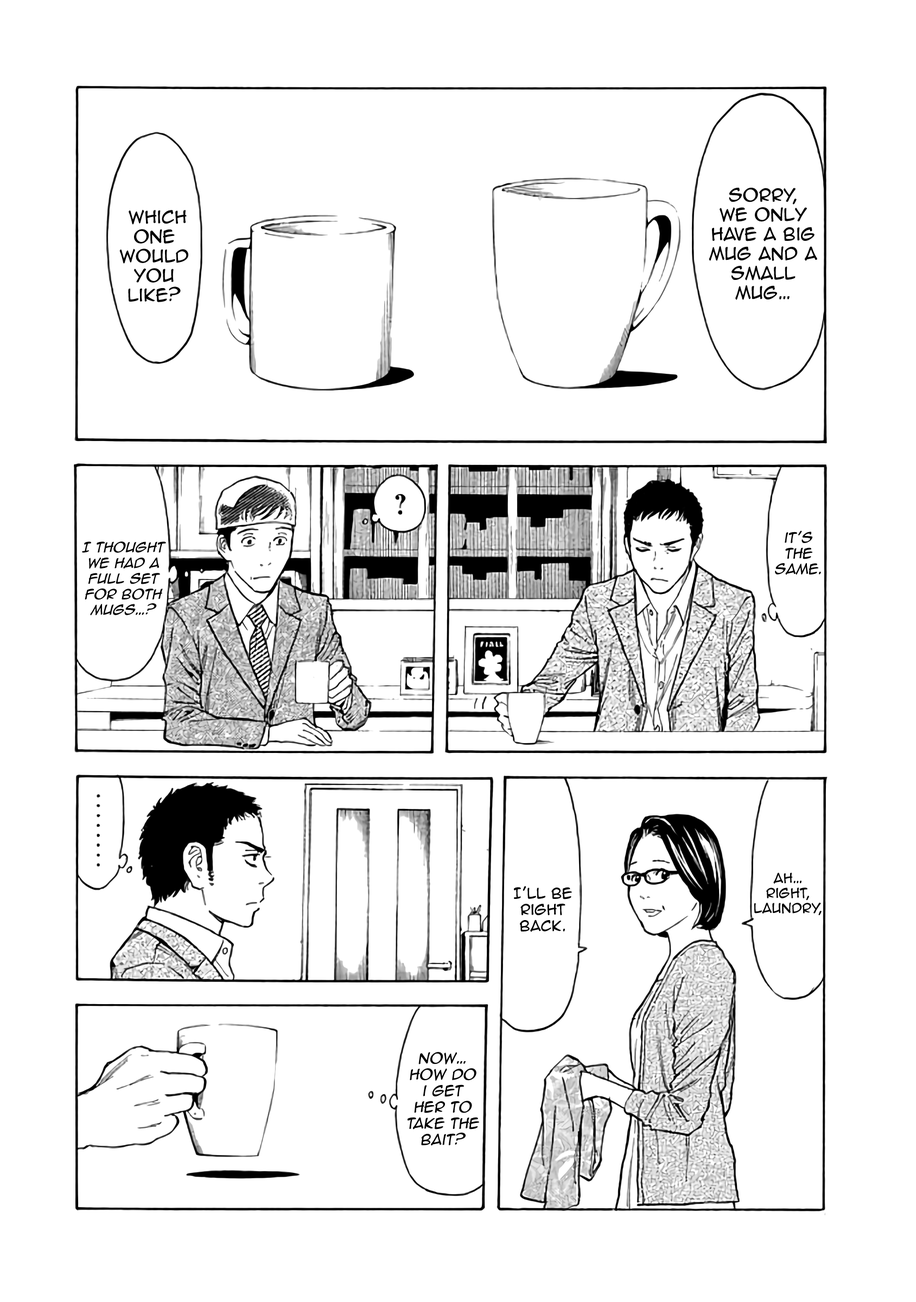
<style>
.page{position:relative;width:916px;height:1302px;background:#ffffff}
.page>*{position:absolute;margin:0}
.t1{font:16.3px "AnimeAce2.0BB";color:#000000}
.t2{font:13px "AnimeAce2.0BB";color:#000000;font-style:italic}
.t3{font:13px "AnimeAce2.0BB-Italic";color:#000000}
.t4{font:12.5px "AnimeAce2.0BB";color:#000000}
.t5{font:13.6px "AnimeAce2.0BB";color:#000000}
.t6{font:13.6px "AnimeAce2.0BB";color:#000000;font-style:italic}
</style>
<div class="page">
<p class="t1" style="left:709px;top:188px;width:108px;height:112px;text-align:center">Sorry,<br>we only have a big mug and a small mug…</p>
<p class="t1" style="left:119px;top:209px;width:69px;height:93px;text-align:center">Which one would you   like?</p>
<p class="t2" style="left:775px;top:531px;width:46px;height:44px;text-align:center">it’s the same.</p>
<p class="t3" style="left:82px;top:541px;width:84px;height:75px;text-align:center">I thought We had a full set for both mugs…?</p>
<p class="t4" style="left:754px;top:872px;width:67px;height:43px;text-align:center">Ah… right,  laundry,</p>
<p class="t5" style="left:514px;top:886px;width:58px;height:46px;text-align:center">I’ll be right back.</p>
<p class="t6" style="left:407px;top:1052px;width:72px;height:94px;text-align:center">Now… how do i get her to take the bait?</p>
</div>
